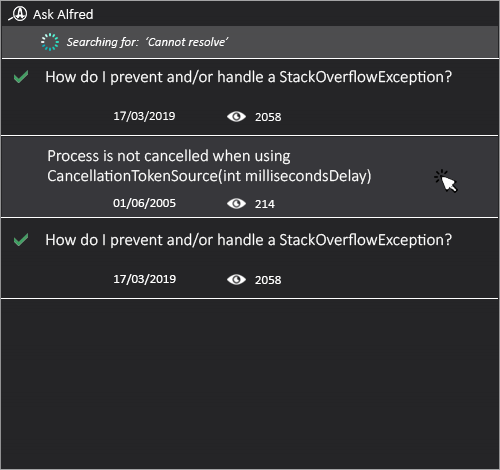
<style>
.page{position:relative;width:500px;height:470px;background:#252527}
.page>*{position:absolute;margin:0}
.t1{font:15px "Calibri-Light";color:#ffffff}
.t2{font:13px "Calibri-LightItalic";color:#ffffff}
.t3{font:17px "Calibri-Light";color:#ffffff}
.t4{font:13px "Calibri-Light";color:#ffffff}
.t5{font:13px "Calibri";color:#ffffff}
</style>
<div class="page">
<p class="t1" style="left:33px;top:9px;width:60px;height:10px">Ask Alfred</p>
<p class="t2" style="left:66px;top:37px;width:163px;height:11px">‘Searching for:  ‘Cannot resolve</p>
<p class="t3" style="left:46px;top:69px;width:406px;height:17px">?How do I prevent and/or handle a StackOverflowException</p>
<p class="t4" style="left:114px;top:111px;width:61px;height:11px">17/03/2019</p>
<p class="t4" style="left:255px;top:113px;width:26px;height:8px">2058</p>
<p class="t3" style="left:48px;top:149px;width:323px;height:36px;text-align:right">Process is not cancelled when using<br>(CancellationTokenSource(int millisecondsDelay</p>
<p class="t5" style="left:113px;top:198px;width:63px;height:11px">01/06/2005</p>
<p class="t5" style="left:255px;top:200px;width:20px;height:8px">214</p>
<p class="t3" style="left:46px;top:232px;width:406px;height:17px">?How do I prevent and/or handle a StackOverflowException</p>
<p class="t5" style="left:114px;top:274px;width:62px;height:11px">17/03/2019</p>
<p class="t5" style="left:255px;top:276px;width:26px;height:8px">2058</p>
</div>
